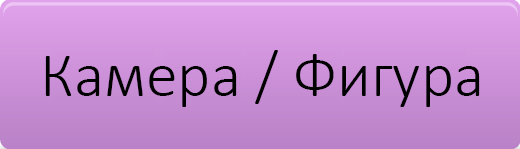
<style>
.page{position:relative;width:520px;height:149px}
.page>*{position:absolute;margin:0}
.t1{font:64px "Calibri-Light";color:#000000}
</style>
<div class="page">
<p class="t1" style="left:45px;top:50px;width:435px;height:57px">Камера / Фигура</p>
</div>
